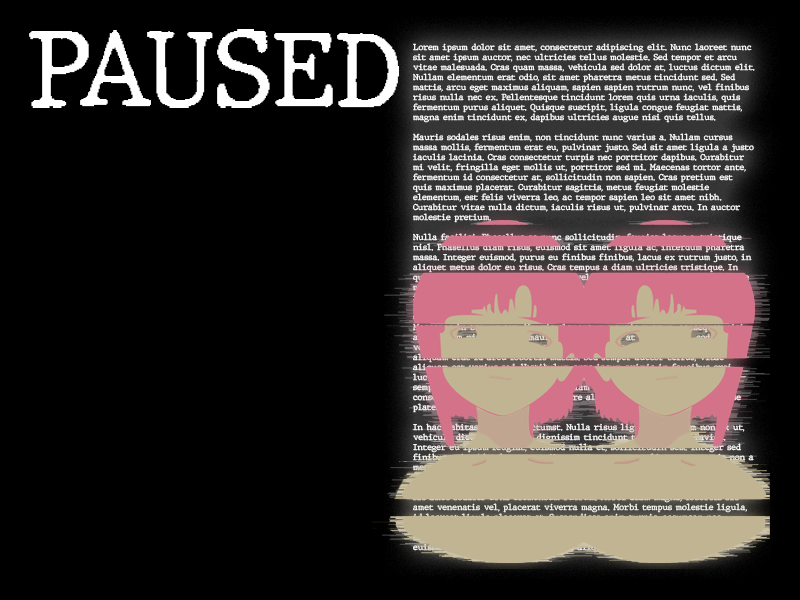
<style>
.page{position:relative;width:800px;height:600px;background:#000000}
.page>*{position:absolute;margin:0}
.t1{font:104.4px "JMHTypewriter-Regular";color:#ffffff}
.t2{font:8.3px "JMHTypewriter-Regular"}
</style>
<div class="page">
<p class="t1" style="left:29px;top:29px;width:370px;height:79px">PAUSED</p>
<p class="t2" style="left:413px;top:43px;width:342px;height:510px">Lorem ipsum dolor sit amet, consectetur adipiscing elit. Nunc laoreet nunc sit amet ipsum auctor, nec ultricies tellus molestie. Sed tempor et arcu vitae malesuada. Cras quam massa, vehicula sed dolor at, luctus dictum elit. Nullam elementum erat odio, sit amet pharetra metus tincidunt sed. Sed mattis, arcu eget maximus aliquam, sapien sapien rutrum nunc, vel finibus risus nulla nec ex. Pellentesque tincidunt lorem quis urna iaculis, quis fermentum purus aliquet. Quisque suscipit, ligula congue feugiat mattis, magna enim tincidunt ex, dapibus ultricies augue nisi quis tellus.<br><br>Mauris sodales risus enim, non tincidunt nunc varius a. Nullam cursus massa mollis, fermentum erat eu, pulvinar justo. Sed sit amet ligula a justo iaculis lacinia. Cras consectetur turpis nec porttitor dapibus. Curabitur mi velit, fringilla eget mollis ut, porttitor sed mi. Maecenas tortor ante, fermentum id consectetur at, sollicitudin non sapien. Cras pretium est quis maximus placerat. Curabitur sagittis, metus feugiat molestie elementum, est felis viverra leo, ac tempor sapien leo sit amet nibh. Curabitur vitae nulla dictum, iaculis risus ut, pulvinar arcu. In auctor molestie pretium.<br><br>Nulla facilisi. Phasellus ac nunc sollicitudin, feugiat lacus a, tristique nisl. Phasellus diam risus, euismod sit amet ligula ac, interdum pharetra massa. Integer euismod, purus eu finibus finibus, lacus ex rutrum justo, in aliquet metus dolor eu risus. Cras tempus a diam ultricies tristique. In quis ullamcorper odio. Nulla tellus velit, vehicula vel mi sed, scelerisque mattis tortor. Aenean faucibus tincidunt ipsum. Praesent porttitor tempor ipsum eu dictum. Phasellus aliquam ligula rhoncus molestie aliquet.<br><br>Cras finibus ipsum eu eros tincidunt, eget convallis ligula tristique. Maecenas in tempus sem. Mauris elementum mauris rutrum, consequat nisi at, aliquam nisl. Quisque mauris leo, porttitor at tincidunt a, sodales vel velit. Curabitur a mi vulputate, varius dolor sed, sodales ipsum. Sed aliquam erat id arcu lobortis mattis. Sed semper auctor tellus, vitae aliquam est varius sed. Vestibulum ante ipsum primis in faucibus orci luctus et ultrices posuere cubilia Curae; Praesent rutrum porttitor semper. Donec in molestie ligula. Etiam auctor dolor id odio maximus consequat ut eget massa. Proin ornare aliquam suscipit. In hac habitasse platea dictumst.<br><br>In hac habitasse platea dictumst. Nulla risus ligula, bibendum non ex ut, vehicula dictum nisl. Duis dignissim tincidunt tellus vitae gravida. Integer eu ipsum feugiat, euismod nulla et, sollicitudin sem. Integer sed finibus enim, id volutpat est. Nam nec ante et eros aliquet venenatis non a metus. Pellentesque eu luctus ante.<br><br>Vivamus a orci ac eros scelerisque accumsan. Cras fringilla euismod nisl, sit amet sodales urna elementum rutrum. Morbi diam magna, lobortis sit amet venenatis vel, placerat viverra magna. Morbi tempus molestie ligula, id laoreet ligula placerat at. Suspendisse enim turpis, accumsan nec porttitor vitae, gravida id risus. Aenean lacus tellus, fringilla sit amet suscipit eget, tempor tincidunt leo. Curabitur eget metus a orci interdum euismod. Quisque in tellus eu lorem aliquam vehicula ut ac felis. Nam varius imperdiet felis tempus accumsan. Donec hendrerit erat dolor. Aenean consectetur ipsum a nisl venenatis malesuada. Sed vulputate lorem at purus facilisis, nec congue lorem commodo. Cras ac diam a libero tristique egestas. Nullam nec blandit massa. Vestibulum ac orci lorem. Suspendisse posuere vitae massa non iaculis.<br><br>Proin sed libero vehicula, pharetra tortor id, placerat ligula. Integer vel tellus vitae velit lacinia varius vitae nec eros. Vivamus sit amet magna at mi venenatis malesuada id nec felis. Morbi mattis enim eget nibh iaculis, ac placerat enim dapibus. In semper, velit vitae egestas congue, risus lectus suscipit odio, quis varius lacus lorem sed lacus. Vivamus auctor, libero ac aliquam posuere, lorem diam dignissim nunc, lacinia luctus sapien justo quis mauris. Sed sed massa quis quam porta fermentum non sit amet arcu. Praesent nec dictum neque.<br><br>Sed tristique tortor ac enim fringilla ultrices. Integer fringilla dolor at quam dapibus, vel maximus orci rutrum. Duis volutpat posuere euismod. Morbi faucibus libero ut lectus posuere, eget consectetur neque condimentum. Morbi mollis eleifend dapibus. Ut dignissim nisl eu dolor venenatis, vel convallis enim accumsan. Suspendisse nec tristique nibh. Aenean ex enim, fringilla vitae bibendum in, scelerisque molestie neque. Curabitur in justo nisi. Quisque varius urna et risus ullamcorper elementum. Vestibulum semper dictum lacus, non malesuada sapien consequat ut. Donec et libero ex. Proin eget orci mauris.</p>
</div>
